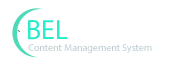
<style>
.page{position:relative;width:172px;height:64px;background:#ffffff}
.page>*{position:absolute;margin:0}
.t1{font:28px "MyriadPro-Regular";color:#2aebcb}
.t2{font:28px "MyriadPro-Regular";color:#ffffff}
.t3{font:10px "MyriadPro-Regular";color:#bdcdd1}
</style>
<div class="page">
<p class="t1" style="left:28px;top:20px;width:97px;height:20px">BEL <span class="t2">CMS</span></p>
<p class="t3" style="left:28px;top:44px;width:124px;height:9px">Content Management System</p>
</div>
